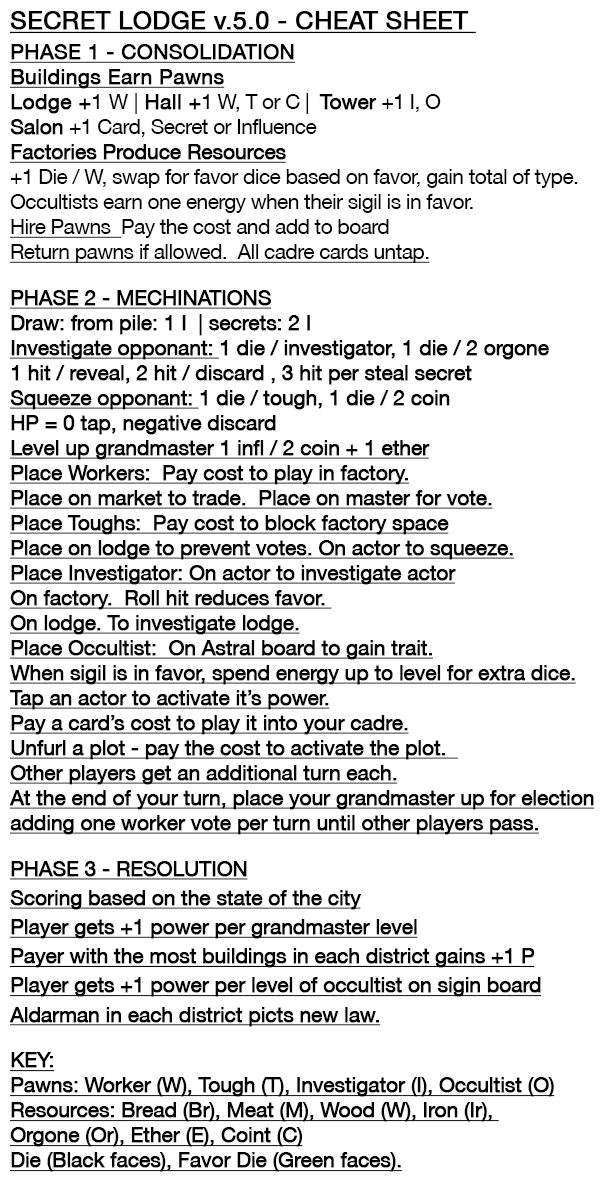
<style>
.page{position:relative;width:600px;height:1200px;background:#ffffff}
.page>*{position:absolute;margin:0}
.t1{font:25px "HelveticaNeueLT-Roman";color:#000000;font-weight:bold;text-decoration:underline}
.t2{font:20.8px/25px "HelveticaNeueLT-Roman";letter-spacing:-0.025em;color:#000000;font-weight:bold;text-decoration:underline}
.t3{font:20.8px/29.2px "HelveticaNeueLT-Roman";color:#000000;font-weight:bold;text-decoration:underline}
.t4{font:20.8px/25px "HelveticaNeueLT-Roman";color:#000000;font-weight:bold;text-decoration:underline}
.t5{font:20.8px/25px "HelveticaNeueLT-Roman";color:#000000;font-weight:bold}
.t6{font:20.8px/25px "HelveticaNeueLT-Roman";color:#000000}
.t7{font:20.8px/25px "HelveticaNeueLT-Roman";letter-spacing:-0.025em;color:#000000}
.t8{font:20.8px/25px "HelveticaNeueLT-Roman";letter-spacing:-0.025em;color:#000000;font-weight:bold}
.t9{font:20.8px/25px "HelveticaNeueLT-Roman";letter-spacing:-0.025em;color:#000000;text-decoration:underline}
.t10{font:20.8px/29.2px "HelveticaNeueLT-Roman";letter-spacing:-0.025em;color:#000000;font-weight:bold;text-decoration:underline}
</style>
<div class="page">
<p class="t1" style="left:10px;top:11px;width:466px;height:23px">SECRET LODGE v.5.0 - CHEAT SHEET</p>
<p class="t2" style="left:9px;top:44px;width:586px;height:1128px"><span class="t3">PHASE 1 - CONSOLIDATION<br></span><span class="t4">Buildings Earn Pawns<br></span><span class="t5">Lodge +</span><span class="t6">1 W | </span><span class="t5">Hall +</span><span class="t7">1 W, T or C |  </span><span class="t8">Tower </span><span class="t7">+1 I, O <br></span><span class="t8">Salon </span><span class="t7">+1 Card, Secret or Influence<br></span>Factories Produce Resources<br><span class="t7">+1 Die / W, swap for favor dice based on favor, gain total of type.<br>Occultists earn one energy when their sigil is in favor.<br></span><span class="t9">Hire Pawns  </span><span class="t7">Pay the cost and add to board<br></span><span class="t9">Return pawns if allowed.  All cadre cards untap.<br><br></span><span class="t10">PHASE 2 - MECHINATIONS<br></span><span class="t8">Draw: from pile: 1 I  | secrets: 2 I<br></span>Investigate opponant: <span class="t8">1 die / investigator, 1 die / 2 orgone<br>1 hit / reveal, 2 hit / discard , 3 hit per steal secret<br></span>Squeeze opponant: <span class="t8">1 die / tough, 1 die / 2 coin<br>HP = 0 tap, negative discard<br></span>Level up grandmaster 1 infl / 2 coin + 1 ether<br>Place Workers:  Pay cost to play in factory.<br>Place on market to trade.  Place on master for vote.<br>Place Toughs:  Pay cost to block factory space<br>Place on lodge to prevent votes. On actor to squeeze.<br>Place Investigator: On actor to investigate actor<br>On factory.  Roll hit reduces favor. <br>On lodge. To investigate lodge.<br>Place Occultist:  On Astral board to gain trait.<br>When sigil is in favor, spend energy up to level for extra dice.<br>Tap an actor to activate it’s power.<br>Pay a card’s cost to play it into your cadre.<br>Unfurl a plot - pay the cost to activate the plot.  <br>Other players get an additional turn each.<br>At the end of your turn, place your grandmaster up for election<br>adding one worker vote per turn until other players pass.<br><br><span class="t10">PHASE 3 - RESOLUTION<br>Scoring based on the state of the city<br>Player gets +1 power per grandmaster level<br>Payer with the most buildings in each district gains +1 P<br>Player gets +1 power per level of occultist on sigin board<br>Aldarman in each district picts new law.<br><br>KEY:<br></span>Pawns: Worker (W), Tough (T), Investigator (I), Occultist (O)<br>Resources: Bread (Br), Meat (M), Wood (W), Iron (Ir), <br>Orgone (Or), Ether (E), Coint (C)<br>Die (Black faces), Favor Die (Green faces).</p>
</div>
